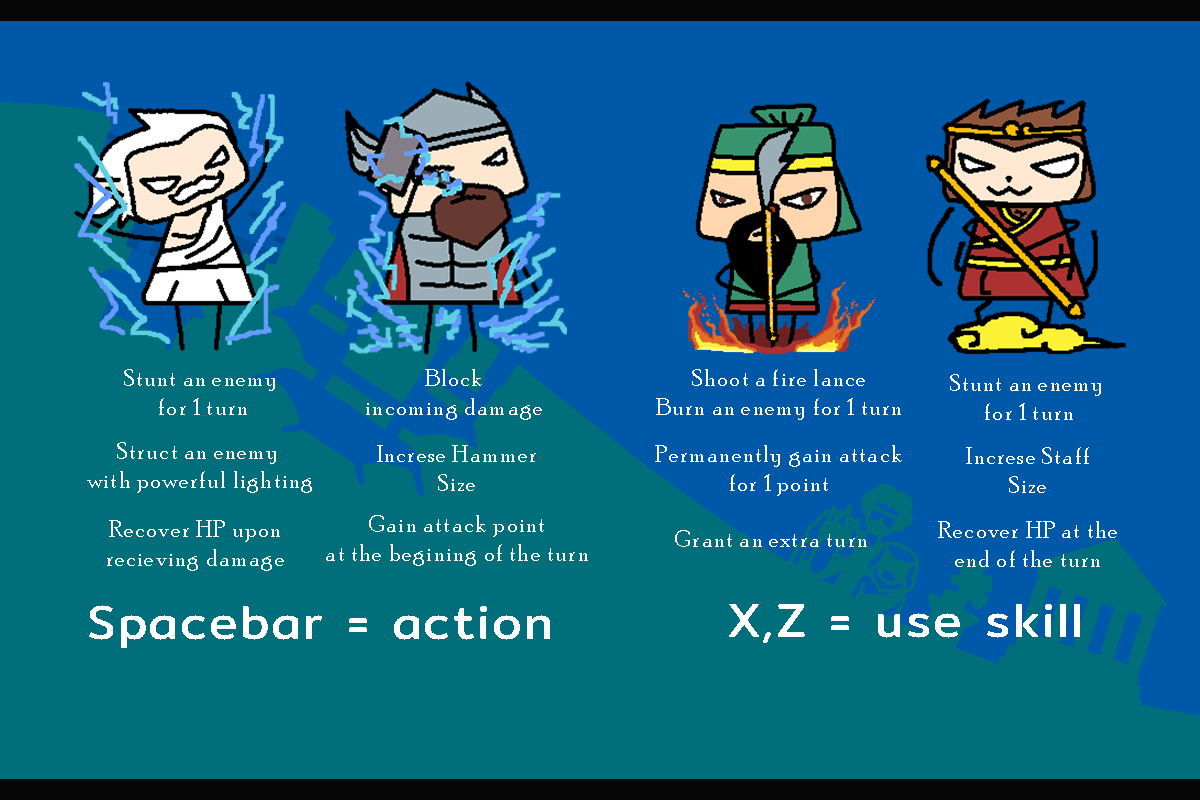
<style>
.page{position:relative;width:1200px;height:800px;background:#006f7b}
.page>*{position:absolute;margin:0}
.t1{font:24px "PoorRichard-Regular";letter-spacing:0.05em;color:#ffffff}
.t2{font:48px "Mitr-Regular";letter-spacing:0.05em;color:#ffffff}
</style>
<div class="page">
<p class="t1" style="left:124px;top:369px;width:151px;height:46px;text-align:center">Stunt an enemy <br>for 1 turn</p>
<p class="t1" style="left:366px;top:369px;width:176px;height:51px;text-align:center">Block<br>incoming damage</p>
<p class="t1" style="left:656px;top:369px;width:245px;height:51px;text-align:center">Shoot a fire lance<br>Burn an enemy for 1 turn</p>
<p class="t1" style="left:950px;top:374px;width:151px;height:46px;text-align:center">Stunt an enemy <br>for 1 turn</p>
<p class="t1" style="left:87px;top:442px;width:225px;height:51px;text-align:center">Struct an enemy <br>with powerful lighting</p>
<p class="t1" style="left:377px;top:445px;width:159px;height:46px;text-align:center">Increse Hammer<br>Size</p>
<p class="t1" style="left:655px;top:445px;width:247px;height:51px;text-align:center">Permanently gain attack<br>for 1 point</p>
<p class="t1" style="left:966px;top:447px;width:123px;height:46px;text-align:center">Increse Staff<br>Size</p>
<p class="t1" style="left:107px;top:520px;width:177px;height:51px;text-align:center">Recover HP upon<br>recieving damage</p>
<p class="t1" style="left:326px;top:515px;width:262px;height:51px;text-align:center">Gain attack point<br>at the begining of the turn</p>
<p class="t1" style="left:938px;top:521px;width:179px;height:46px;text-align:center">Recover HP at the<br>end of the turn</p>
<p class="t1" style="left:675px;top:530px;width:192px;height:17px">Grant an extra turn</p>
<p class="t2" style="left:89px;top:605px;width:461px;height:43px">Spacebar = action</p>
<p class="t2" style="left:729px;top:604px;width:351px;height:39px">X,Z = use skill</p>
</div>
